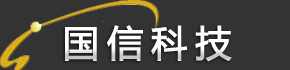
<style>
.page{position:relative;width:290px;height:70px;background:#333333}
.page>*{position:absolute;margin:0}
.t1{font:36px "MicrosoftYaHei";letter-spacing:0.2em;color:#ffffff;font-weight:bold}
</style>
<div class="page">
<p class="t1" style="left:65px;top:25px;width:167px;height:37px">国信科技</p>
</div>
